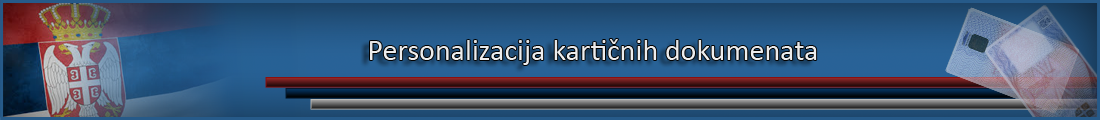
<style>
.page{position:relative;width:1100px;height:120px}
.page>*{position:absolute;margin:0}
.t1{font:30px "Calibri";color:#ffffff}
</style>
<div class="page">
<p class="t1" style="left:370px;top:39px;width:447px;height:26px">Personalizacija kartičnih dokumenata</p>
</div>
